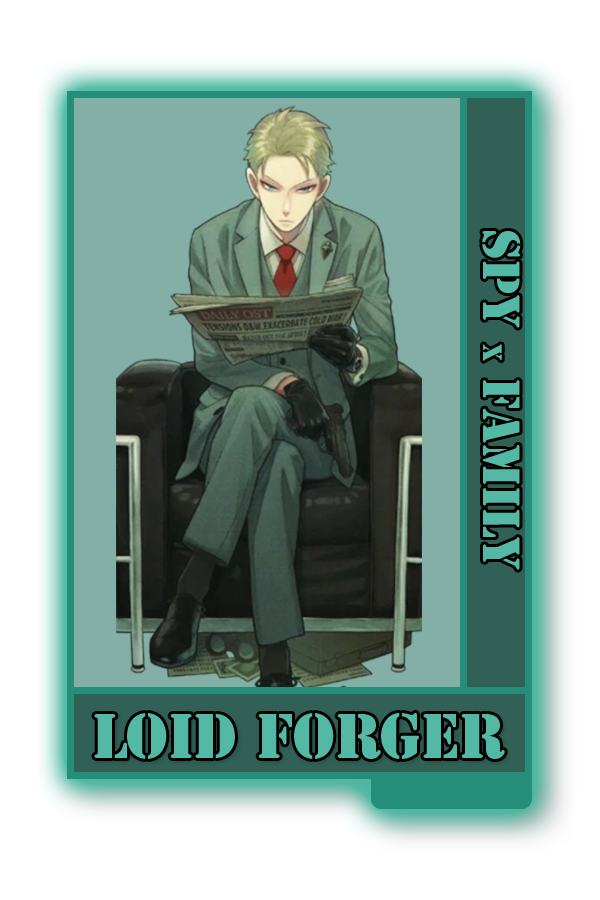
<style>
.page{position:relative;width:600px;height:900px;background:#ffffff}
.page>*{position:absolute;margin:0}
.t1{font:48.8px "StencilStd";color:#54b9a4}
.t2{font:25px "StencilStd";color:#54b9a4}
.t3{font:58.3px "StencilStd";color:#54b9a4}
</style>
<div class="page">
<p class="t1" style="left:482px;top:231px;width:39px;height:339px;rotate:90deg">Spy <span class="t2">x</span> Family</p>
<p class="t3" style="left:94px;top:713px;width:411px;height:46px">Loid Forger</p>
</div>
